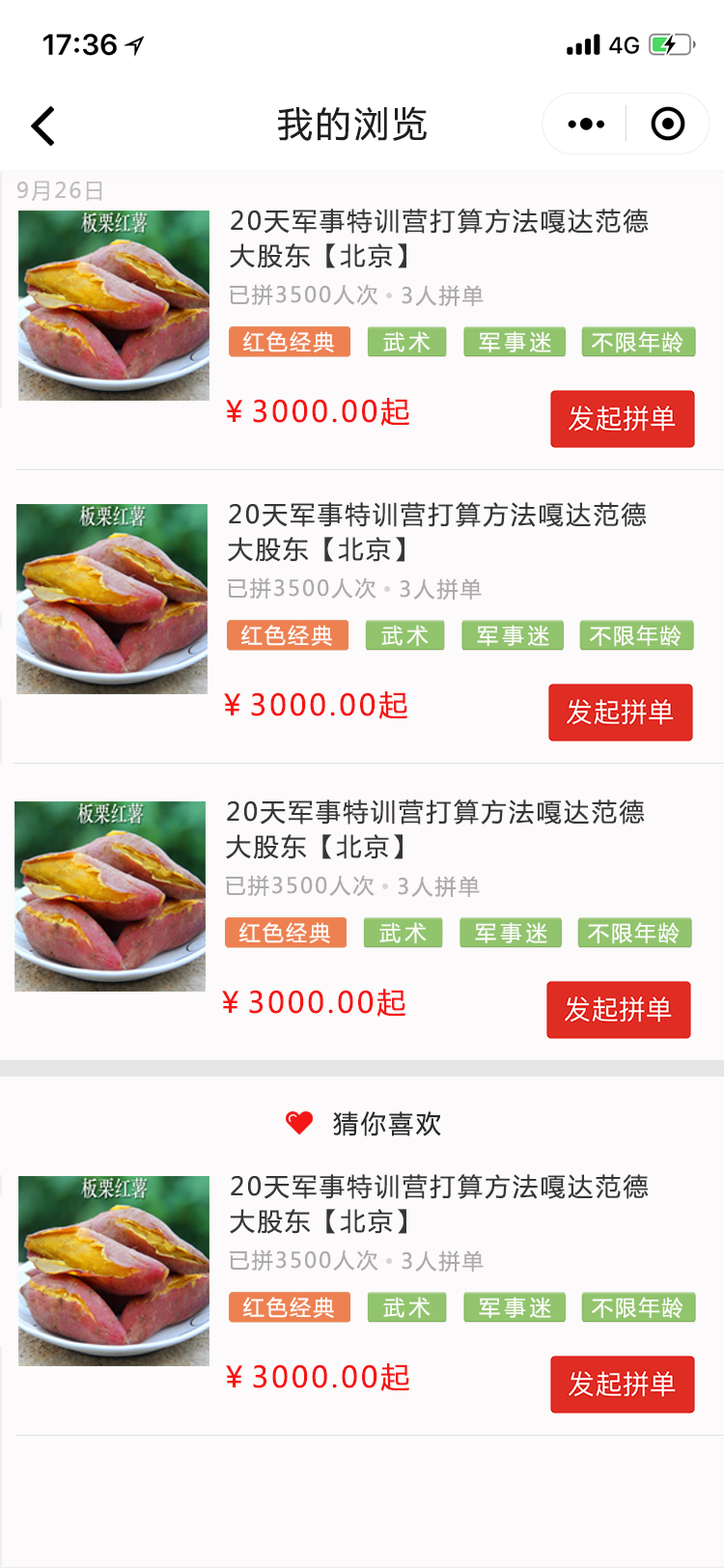
<style>
.page{position:relative;width:724px;height:1568px;background:#fcfafa}
.page>*{position:absolute;margin:0}
.t1{font:34.8px "MicrosoftYaHei";letter-spacing:0.1em;color:#201f20}
.t2{font:21.2px "MicrosoftYaHei";letter-spacing:0.1em;color:#c0bebe}
.t3{font:25.1px/34.8px "MicrosoftYaHei";letter-spacing:0.1em;color:#373636}
.t4{font:21.2px "MicrosoftYaHei";letter-spacing:0.1em;color:#adaaaa}
.t5{font:21.2px "MicrosoftYaHei";letter-spacing:0.1em;color:#fdfcfb}
.t6{font:21.2px "MicrosoftYaHei";letter-spacing:0.2em;color:#fdfcfb}
.t7{font:29px "MicrosoftYaHei";letter-spacing:0.1em;color:#f71414}
.t8{font:25.1px "MicrosoftYaHei";letter-spacing:0.1em;color:#2a2929}
</style>
<div class="page">
<p class="t1" style="left:278px;top:106px;width:149px;height:35px">我的浏览</p>
<p class="t2" style="left:17px;top:181px;width:85px;height:21px">9月26日</p>
<p class="t3" style="left:230px;top:209px;width:419px;height:59px">20天军事特训营打算方法嘎达范德<br>大股东【北京】</p>
<p class="t4" style="left:230px;top:284px;width:148px;height:22px">已拼3500人次</p>
<p class="t4" style="left:402px;top:285px;width:82px;height:22px">3人拼单</p>
<p class="t5" style="left:243px;top:331px;width:91px;height:21px">红色经典</p>
<p class="t6" style="left:383px;top:331px;width:48px;height:21px">武术</p>
<p class="t6" style="left:479px;top:331px;width:72px;height:21px">军事迷</p>
<p class="t5" style="left:592px;top:331px;width:92px;height:22px">不限年龄</p>
<p class="t7" style="left:226px;top:398px;width:183px;height:28px">￥3000.00起</p>
<p class="t3" style="left:228px;top:502px;width:419px;height:60px">20天军事特训营打算方法嘎达范德<br>大股东【北京】</p>
<p class="t4" style="left:228px;top:577px;width:149px;height:23px">已拼3500人次</p>
<p class="t4" style="left:400px;top:578px;width:82px;height:23px">3人拼单</p>
<p class="t5" style="left:241px;top:625px;width:91px;height:21px">红色经典</p>
<p class="t6" style="left:381px;top:625px;width:48px;height:21px">武术</p>
<p class="t6" style="left:477px;top:625px;width:72px;height:21px">军事迷</p>
<p class="t5" style="left:590px;top:625px;width:92px;height:22px">不限年龄</p>
<p class="t7" style="left:224px;top:691px;width:183px;height:28px">￥3000.00起</p>
<p class="t3" style="left:226px;top:799px;width:419px;height:60px">20天军事特训营打算方法嘎达范德<br>大股东【北京】</p>
<p class="t4" style="left:226px;top:875px;width:149px;height:22px">已拼3500人次</p>
<p class="t4" style="left:398px;top:876px;width:82px;height:22px">3人拼单</p>
<p class="t5" style="left:239px;top:922px;width:91px;height:21px">红色经典</p>
<p class="t6" style="left:379px;top:922px;width:48px;height:21px">武术</p>
<p class="t6" style="left:475px;top:922px;width:72px;height:21px">军事迷</p>
<p class="t5" style="left:588px;top:922px;width:92px;height:22px">不限年龄</p>
<p class="t7" style="left:222px;top:989px;width:184px;height:28px">￥3000.00起</p>
<p class="t8" style="left:333px;top:1111px;width:108px;height:25px">猜你喜欢</p>
<p class="t3" style="left:230px;top:1174px;width:419px;height:60px">20天军事特训营打算方法嘎达范德<br>大股东【北京】</p>
<p class="t4" style="left:230px;top:1249px;width:148px;height:23px">已拼3500人次</p>
<p class="t4" style="left:402px;top:1250px;width:82px;height:23px">3人拼单</p>
<p class="t5" style="left:243px;top:1297px;width:91px;height:21px">红色经典</p>
<p class="t6" style="left:383px;top:1297px;width:48px;height:21px">武术</p>
<p class="t6" style="left:479px;top:1297px;width:72px;height:21px">军事迷</p>
<p class="t5" style="left:592px;top:1297px;width:92px;height:22px">不限年龄</p>
<p class="t7" style="left:226px;top:1363px;width:183px;height:28px">￥3000.00起</p>
</div>
